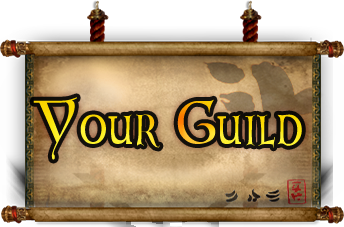
<style>
.page{position:relative;width:344px;height:227px}
.page>*{position:absolute;margin:0}
.t1{font:61.9px "Lombardic";scale:0.81 1}
</style>
<div class="page">
<p class="t1" style="left:33px;top:97px;width:269px;height:63px">Your Guild</p>
</div>
